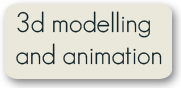
<style>
.page{position:relative;width:181px;height:88px;background:#eae7db}
.page>*{position:absolute;margin:0}
.t1{font:27.2px "GeosansLight";color:#132528}
</style>
<div class="page">
<p class="t1" style="left:16px;top:11px;width:146px;height:54px">3d modelling<br>and animation</p>
</div>
